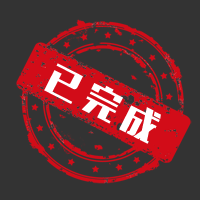
<style>
.page{position:relative;width:200px;height:200px;background:#333333}
.page>*{position:absolute;margin:0}
.t1{font:34.2px "MFLiHei_Noncommercial-Regular";letter-spacing:0.26em;color:#ffffff}
</style>
<div class="page">
<p class="t1" style="left:44px;top:63px;width:117px;height:81px;rotate:27deg">已完成</p>
</div>
